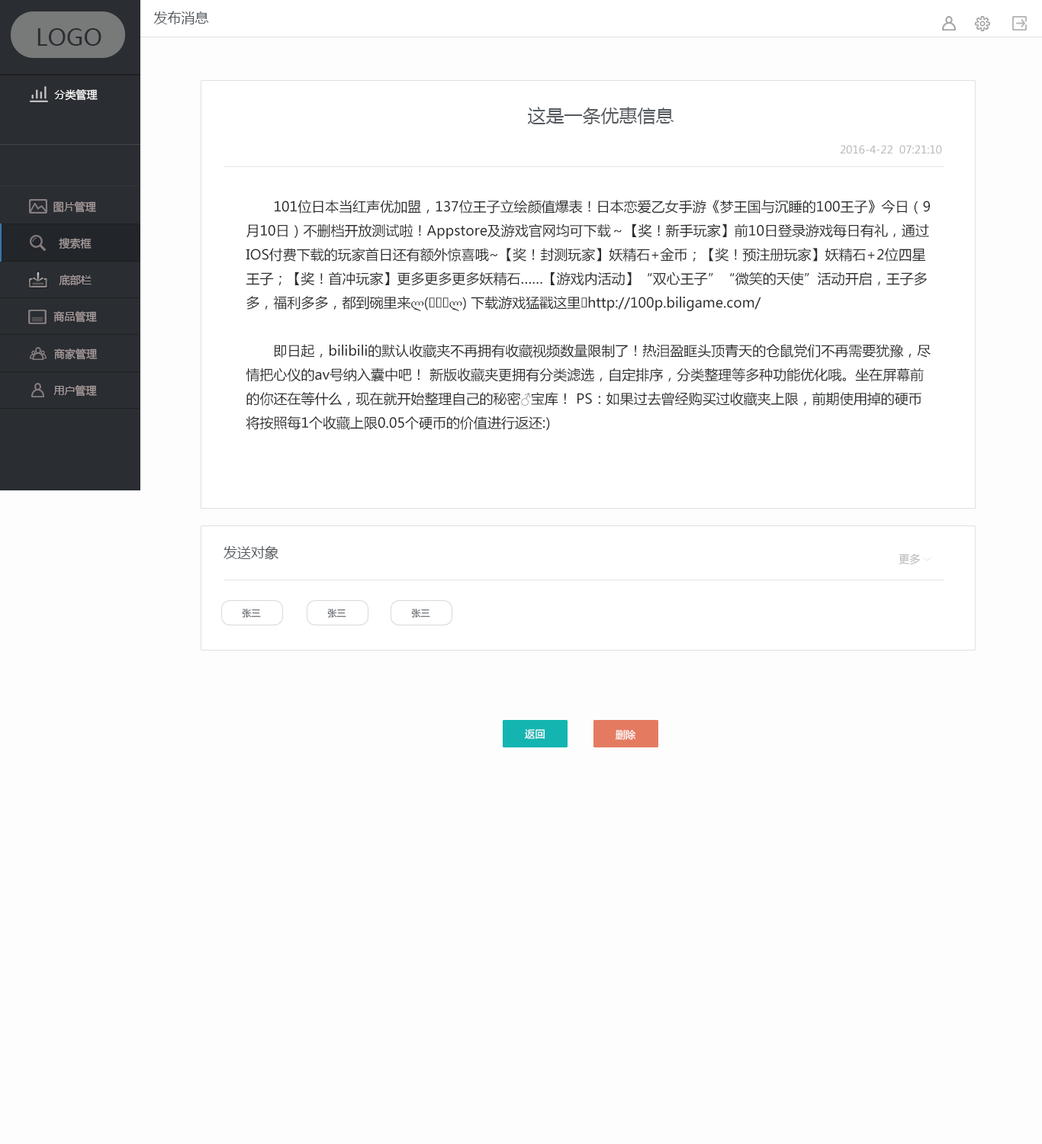
<style>
.page{position:relative;width:1042px;height:1144px;background:#fdfdfd}
.page>*{position:absolute;margin:0}
.t1{font:13.7px "MicrosoftYaHei";color:#555a5f}
.t2{font:22.9px "MicrosoftYaHei";color:#2a2d32}
.t3{font:10.7px "MicrosoftYaHei";color:#ffffff}
.t4{font:18.3px "MicrosoftYaHei";color:#555a5f}
.t5{font:10.7px "MicrosoftYaHei";color:#b5b5b5}
.t6{font:10.7px "MicrosoftYaHei";color:#ab9f9f}
.t7{font:13.7px "MicrosoftYaHei";color:#2c2e2f}
.t8{font:13.7px "Sylfaen";color:#2c2e2f}
.t9{font:10.7px "MicrosoftYaHei";color:#bdbdbd}
.t10{font:9.2px "MicrosoftYaHei";color:#61666c}
.t11{font:10.1px "MicrosoftYaHei";color:#ffffff}
</style>
<div class="page">
<p class="t1" style="left:153px;top:11px;width:56px;height:13px">发布消息</p>
<p class="t2" style="left:37px;top:28px;width:64px;height:18px">LOGO</p>
<p class="t3" style="left:54px;top:89px;width:44px;height:12px">分类管理</p>
<p class="t4" style="left:527px;top:107px;width:147px;height:17px">这是一条优惠信息</p>
<p class="t5" style="left:840px;top:145px;width:102px;height:9px">2016-4-22  07:21:10</p>
<p class="t6" style="left:53px;top:201px;width:43px;height:12px">图片管理</p>
<p class="t7" style="left:246px;top:200px;width:685px;height:230px">101位日本当红声优加盟，137位王子立绘颜值爆表！日本恋爱乙女手游《梦王国与沉睡的100王子》今日（9<br>月10日）不删档开放测试啦！Appstore及游戏官网均可下载～【奖！新手玩家】前10日登录游戏每日有礼，通过<br>IOS付费下载的玩家首日还有额外惊喜哦~【奖！封测玩家】妖精石+金币；【奖！预注册玩家】妖精石+2位四星<br>王子；【奖！首冲玩家】更多更多更多妖精石……【游戏内活动】“双心王子”“微笑的天使”活动开启，王子多<br>多，福利多多，都到碗里来<span class="t8">ლ</span>(<span class="t8">╹◡╹ლ</span>) 下载游戏猛戳这里<span class="t8">☞</span>http://100p.biligame.com/<br><br> 即日起，bilibili的默认收藏夹不再拥有收藏视频数量限制了！热泪盈眶头顶青天的仓鼠党们不再需要犹豫，尽<br>情把心仪的av号纳入囊中吧！ 新版收藏夹更拥有分类滤选，自定排序，分类整理等多种功能优化哦。坐在屏幕前<br>的你还在等什么，现在就开始整理自己的秘密♂宝库！ PS：如果过去曾经购买过收藏夹上限，前期使用掉的硬币<br>将按照每1个收藏上限0.05个硬币的价值进行返还:)</p>
<p class="t6" style="left:59px;top:238px;width:33px;height:11px">搜索框</p>
<p class="t6" style="left:59px;top:275px;width:33px;height:10px">底部栏</p>
<p class="t6" style="left:53px;top:311px;width:44px;height:12px">商品管理</p>
<p class="t6" style="left:54px;top:349px;width:44px;height:11px">商家管理</p>
<p class="t6" style="left:53px;top:385px;width:44px;height:12px">用户管理</p>
<p class="t1" style="left:224px;top:545px;width:54px;height:15px">发送对象</p>
<p class="t9" style="left:899px;top:554px;width:21px;height:11px">更多</p>
<p class="t10" style="left:242px;top:609px;width:19px;height:9px">张三</p>
<p class="t10" style="left:327px;top:609px;width:19px;height:9px">张三</p>
<p class="t10" style="left:411px;top:609px;width:19px;height:9px">张三</p>
<p class="t11" style="left:525px;top:729px;width:20px;height:10px">返回</p>
<p class="t11" style="left:615px;top:729px;width:21px;height:11px">删除</p>
</div>
